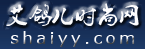
<style>
.page{position:relative;width:145px;height:49px}
.page>*{position:absolute;margin:0}
.t1{font:22.6px "Ò¶¸ùÓÑÃ«±ÊÐÐÊé¼òÌå";color:#fcfcfd}
.t2{font:16.7px "MSReferenceSansSerif";letter-spacing:0.2em}
</style>
<div class="page">
<p class="t1" style="left:6px;top:3px;width:133px;height:23px">艾鸽儿时尚网</p>
<p class="t2" style="left:11px;top:31px;width:124px;height:16px">shaiyy.com</p>
</div>
